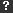
<style>
.page{position:relative;width:13px;height:13px;background:#333333}
.page>*{position:absolute;margin:0}
.t1{font:12px "HelveticaNeue-Bold";color:#ffffff}
</style>
<div class="page">
<p class="t1" style="left:3px;top:1px;width:6px;height:9px">?</p>
</div>
